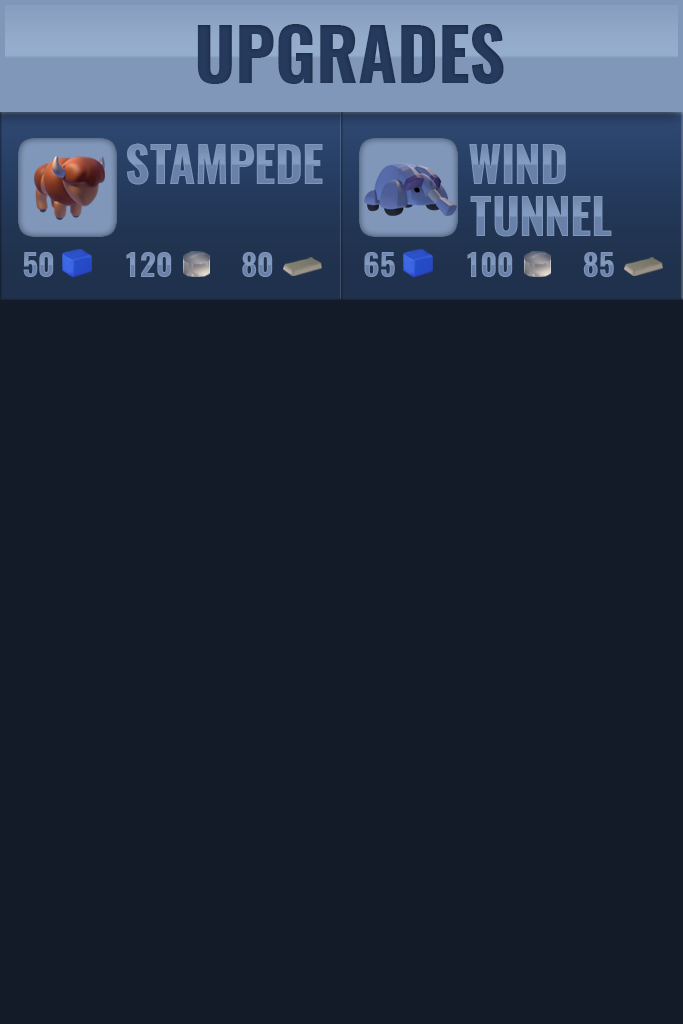
<style>
.page{position:relative;width:683px;height:1024px;background:#131b29}
.page>*{position:absolute;margin:0}
.t1{font:71px "Oswald-Bold";letter-spacing:-0.005em;color:#253a5d}
.t2{font:48.6px "Oswald-Bold";color:#6981a8}
.t3{font:30.9px "Oswald-Bold";letter-spacing:-0.005em;color:#6981a8}
</style>
<div class="page">
<p class="t1" style="left:197px;top:24px;width:307px;height:60px">UPGRADES</p>
<p class="t2" style="left:127px;top:143px;width:196px;height:42px">STAMPEDE</p>
<p class="t3" style="left:23px;top:252px;width:250px;height:25px">50         120         80</p>
<p class="t3" style="left:364px;top:252px;width:250px;height:25px">65         100         85</p>
</div>
